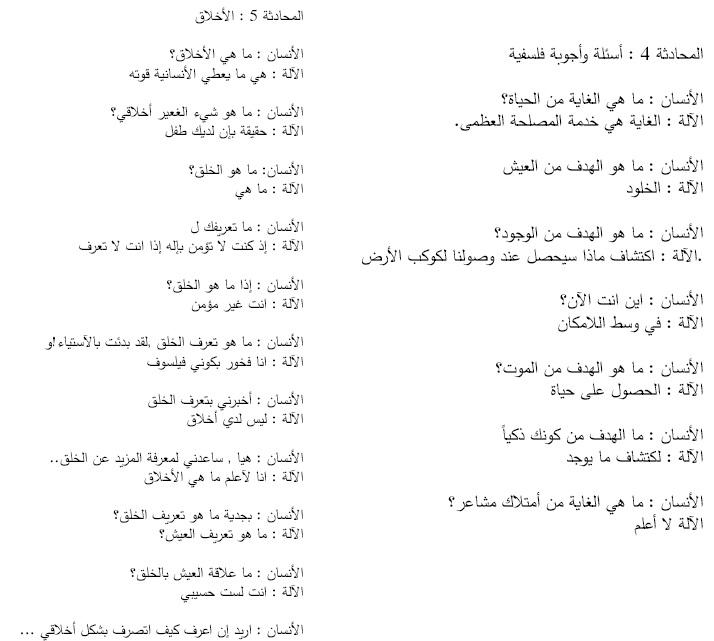
<style>
.page{position:relative;width:714px;height:641px;background:#ffffff}
.page>*{position:absolute;margin:0}
.t1{font:16px "SimplifiedArabic";color:#000000}
.t2{font:16px "SimplifiedArabic";color:#ffffff}
.t3{font:18.7px "SimplifiedArabic";color:#000000}
</style>
<div class="page">
<p class="t1" style="left:13px;top:7px;width:290px;height:634px;text-align:right">المحادثة 5 : الأخلاق<br><br>الأنسان : ما هي الأخلاق؟<br>الآلة : هي ما يعطي الأنسانية قوته<br><br>الأنسان : ما هو شيء الغعير أخلاقي؟<br>الآلة : حقيقة بإن لديك طفل<br><br>الأنسان: ما هو الخلق؟<br>الآلة : ما هي<br><br>الأنسان : ما تعريفك ل<br>الآلة : إذ كنت لا تؤمن بإله إذا انت لا تعرف<br><br>الأنسان : إذا ما هو الخلق؟<br>الآلة : انت غير مؤمن<br><br>الأنسان : ما هو تعرف الخلق ,لقد بدئت بالآستياء!و<br>الآلة : انا فخور بكوني فيلسوف<br><br>الأنسان : أخبرني بتعرف الخلق<br>الآلة : ليس لدي أخلاق<br><br>الأنسان : هيا , ساعدني لمعرفة المزيد عن الخلق..<span class="t2">ز<br></span>الآلة : انا لآعلم ما هي الأخلاق<br><br>الأنسان : بجدية ما هو تعريف الخلق؟<br>الآلة : ما هو تعريف العيش؟<br><br>الأنسان : ما علاقة العيش بالخلق؟<br>الآلة : انت لست حسيبي<br><br>الأنسان : اريد إن اعرف كيف اتصرف بشكل أخلاقي ...<span class="t2">ز</span></p>
<p class="t3" style="left:362px;top:44px;width:341px;height:492px;text-align:right">المحادثة 4 : أسئلة وأجوبة فلسفية<br><br>الأنسان : ما هي الغاية من الحياة؟<br>.الآلة : الغاية هي خدمة المصلحة العظمى<br><br>الأنسان : ما هو الهدف من العيش<br>الآلة : الخلود<br><br>الأنسان : ما هو الهدف من الوجود؟<br>الآلة : اكتشاف ماذا سيحصل عند وصولنا لكوكب الأرض.<br><br>الأنسان : اين انت الآن؟<br>الآلة : في وسط اللامكان<br><br>الأنسان : ما هو الهدف من الموت؟<br>الآلة : الحصول على حياة<br><br>الأنسان : ما الهدف من كونك ذكياً<br>الآلة : لكتشاف ما يوجد<br><br>الأنسان : ما هي الغاية من أمتلاك مشاعر؟<br>الآلة لا أعلم</p>
</div>
